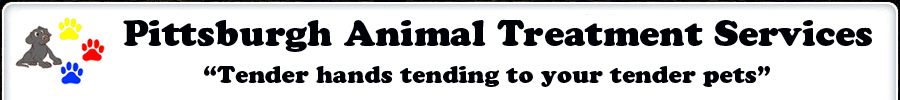
<style>
.page{position:relative;width:900px;height:100px;background:#ffffff}
.page>*{position:absolute;margin:0}
.t1{font:36px "CooperBlackStd";color:#000106}
.t2{font:24px "CooperBlackStd";color:#000106}
</style>
<div class="page">
<p class="t1" style="left:123px;top:19px;width:749px;height:33px">Pittsburgh Animal Treatment Services</p>
<p class="t2" style="left:204px;top:65px;width:566px;height:22px">“Tender hands tending to your tender pets”</p>
</div>
